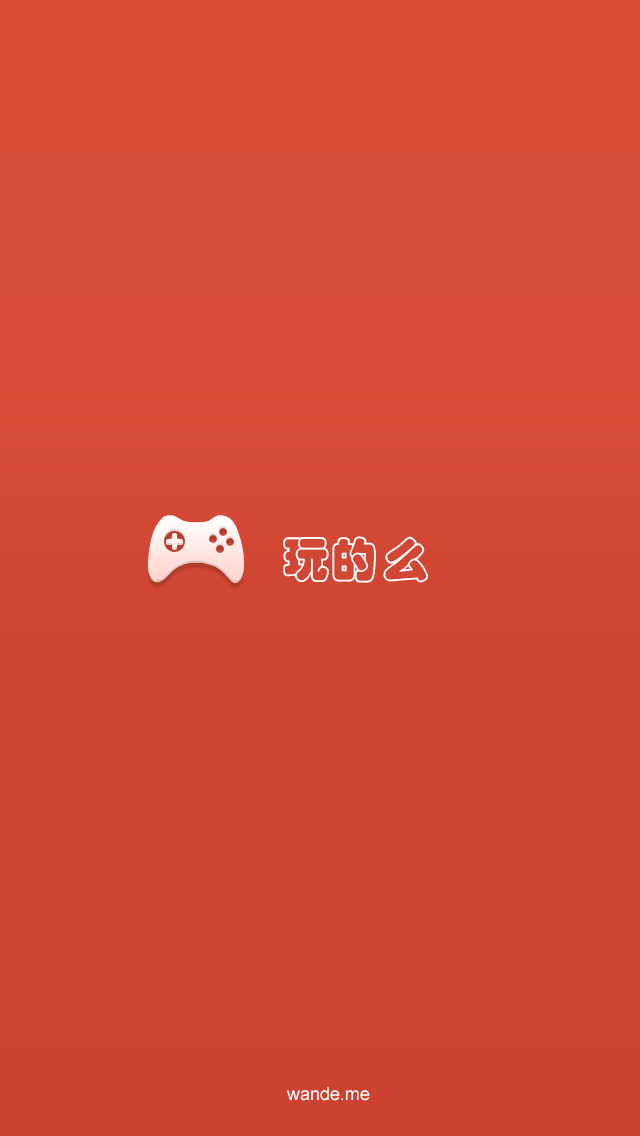
<style>
.page{position:relative;width:640px;height:1136px;background:#cc432f}
.page>*{position:absolute;margin:0}
.t1{font:48px "STCaiyun";color:#ffffff}
.t2{font:18px "ArialMT";color:#ffffff}
</style>
<div class="page">
<p class="t1" style="left:283px;top:536px;width:145px;height:47px">玩的么</p>
<p class="t2" style="left:287px;top:1087px;width:83px;height:14px">wande.me</p>
</div>
